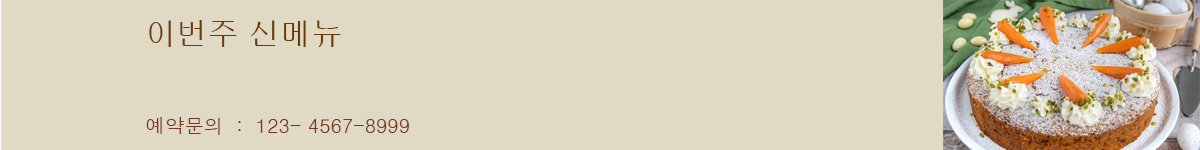
<style>
.page{position:relative;width:1200px;height:150px;background:#e0d9c4}
.page>*{position:absolute;margin:0}
.t1{font:31.1px "H2gprM";color:#703a06}
.t2{font:19.4px "Dotum";color:#7d3520}
</style>
<div class="page">
<p class="t1" style="left:149px;top:20px;width:192px;height:27px">이번주 신메뉴</p>
<p class="t2" style="left:146px;top:117px;width:263px;height:18px">예약문의  :  123- 4567-8999</p>
</div>
